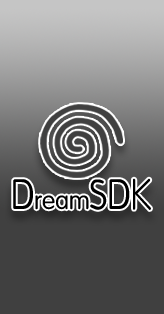
<style>
.page{position:relative;width:164px;height:314px;background:#404040}
.page>*{position:absolute;margin:0}
.t1{font:31.1px "Dreamcast";letter-spacing:-0.01em;color:#000000}
</style>
<div class="page">
<p class="t1" style="left:13px;top:178px;width:138px;height:32px">DreamSDK</p>
</div>
